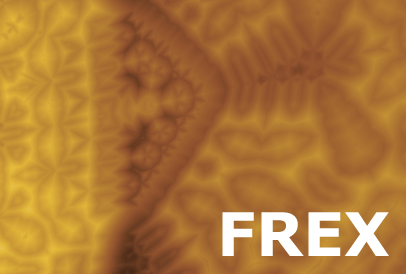
<style>
.page{position:relative;width:406px;height:274px}
.page>*{position:absolute;margin:0}
.t1{font:60px "Verdana-Bold";color:#ffffff}
</style>
<div class="page">
<p class="t1" style="left:222px;top:212px;width:167px;height:44px">FREX</p>
</div>
